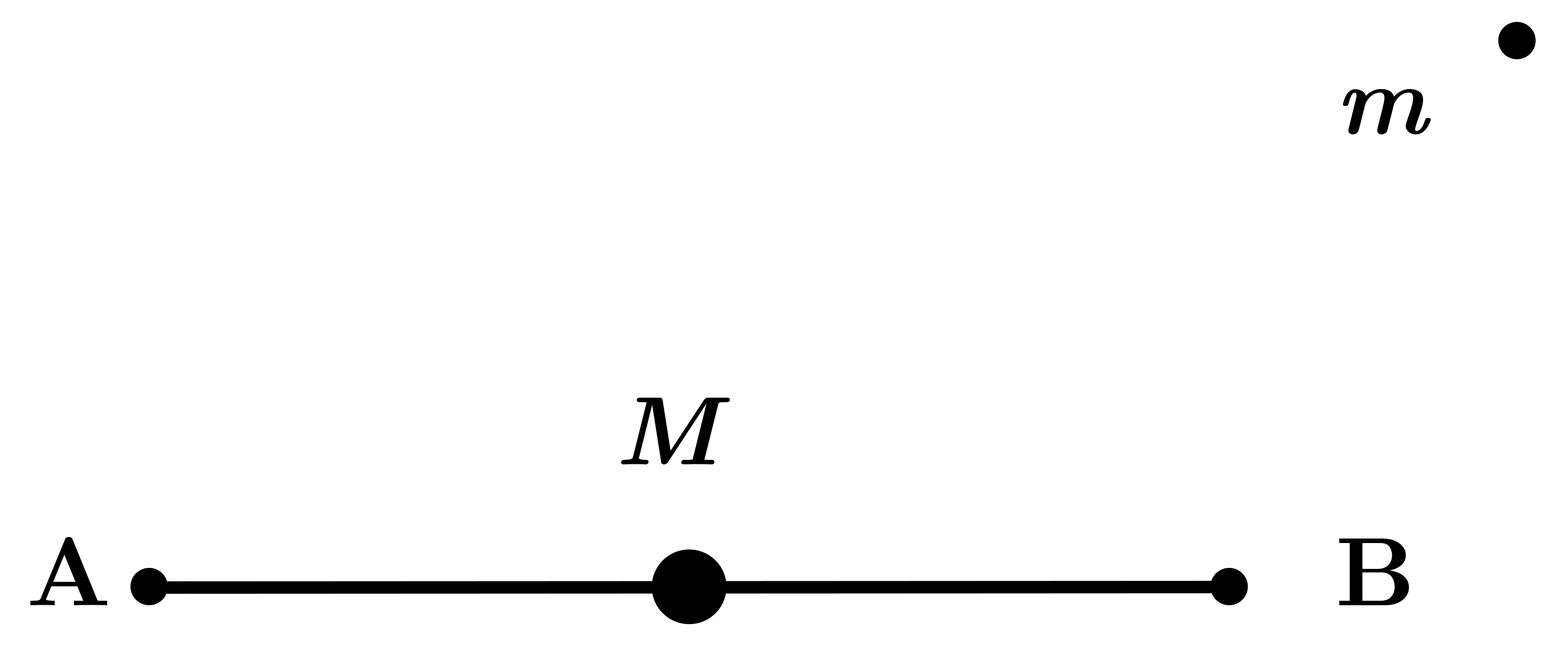
<style>
.page{position:relative;width:1568px;height:654px;background:#ffffff}
.page>*{position:absolute;margin:0}
.t1{font:97.6px "CMUSerif-BoldItalic";color:#000000}
.t2{font:97.6px "CMUSerif-Bold";color:#000000}
</style>
<div class="page">
<p class="t1" style="left:1343px;top:89px;width:88px;height:45px">m</p>
<p class="t1" style="left:621px;top:398px;width:109px;height:67px">M</p>
<p class="t2" style="left:30px;top:537px;width:78px;height:68px">A</p>
<p class="t2" style="left:1339px;top:539px;width:70px;height:66px">B</p>
</div>
